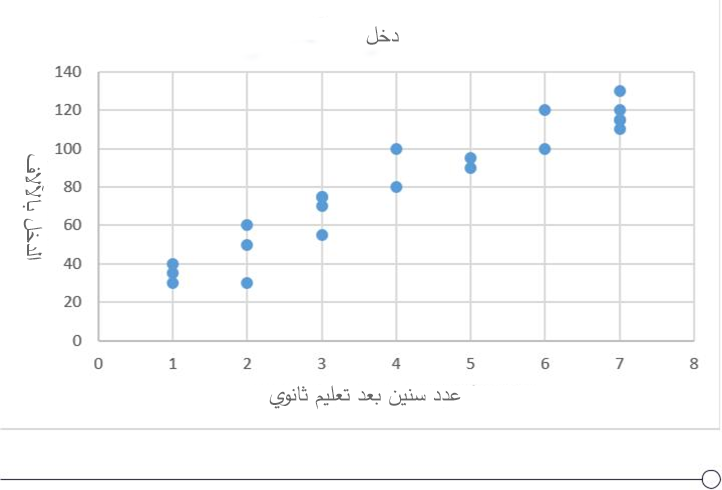
<style>
.page{position:relative;width:722px;height:490px;background:#ffffff}
.page>*{position:absolute;margin:0}
.t1{font:24px "SimplifiedArabic";color:#666666}
</style>
<div class="page">
<p class="t1" style="left:366px;top:26px;width:33px;height:19px">دخل</p>
<p class="t1" style="left:22px;top:154px;width:22px;height:106px;text-align:right">الدخل بالآلاف</p>
<p class="t1" style="left:269px;top:385px;width:192px;height:25px">عدد سنين بعد تعليم ثانوي</p>
</div>
